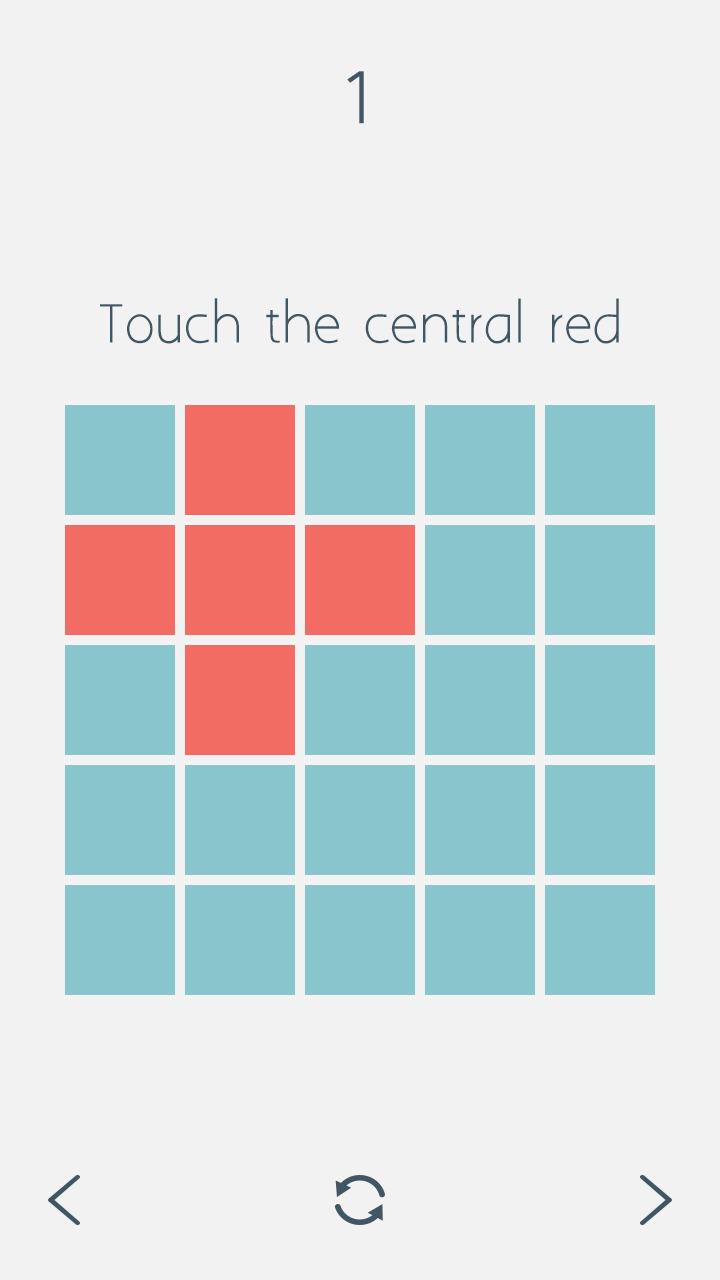
<style>
.page{position:relative;width:720px;height:1280px;background:#f2f2f2}
.page>*{position:absolute;margin:0}
.t1{font:90px "AaarghNormal";color:#405663}
.t2{font:48px "AaarghNormal";color:#405663}
</style>
<div class="page">
<p class="t1" style="left:347px;top:71px;width:17px;height:53px">1</p>
<p class="t2" style="left:100px;top:298px;width:519px;height:46px">Touch the central red</p>
</div>
